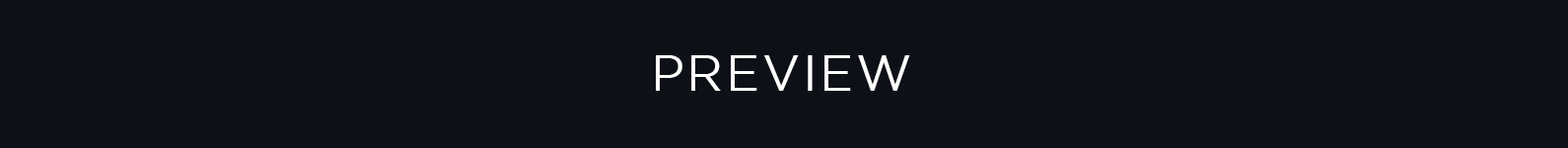
<style>
.page{position:relative;width:1568px;height:148px;background:#0d1117}
.page>*{position:absolute;margin:0}
.t1{font:50.3px "Gotham-Book";letter-spacing:0.05em;color:#ffffff;text-transform:uppercase}
</style>
<div class="page">
<p class="t1" style="left:656px;top:55px;width:254px;height:36px">preview</p>
</div>
